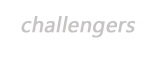
<style>
.page{position:relative;width:150px;height:60px;background:#ffffff}
.page>*{position:absolute;margin:0}
.t1{font:21.6px "YuGothicUI-Regular";color:#c6c3c3;font-weight:bold;font-style:italic}
</style>
<div class="page">
<p class="t1" style="left:21px;top:16px;width:114px;height:22px">challengers</p>
</div>
